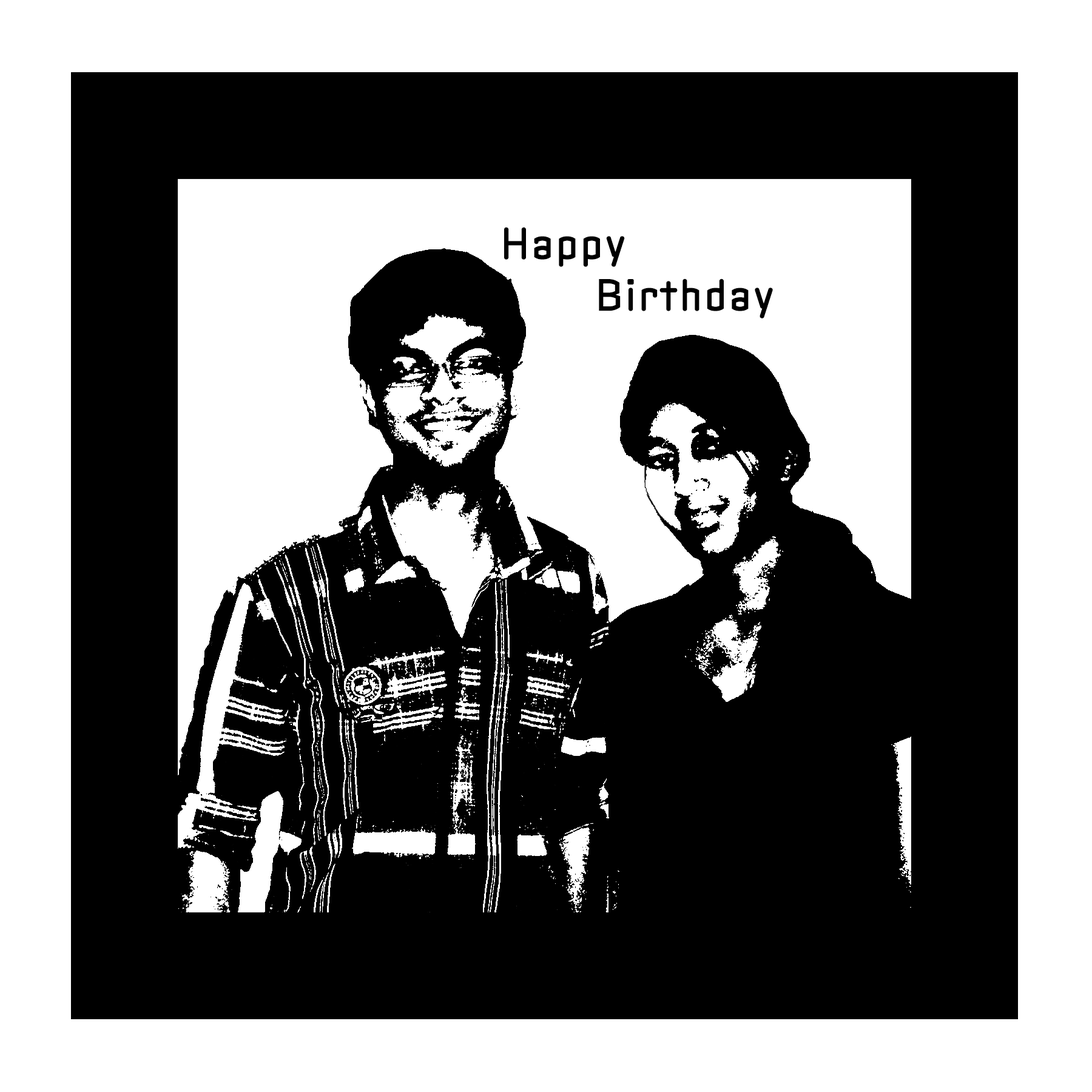
<style>
.page{position:relative;width:1092px;height:1092px;background:#000000}
.page>*{position:absolute;margin:0}
.t1{font:43px "Clicker";color:#000000}
</style>
<div class="page">
<p class="t1" style="left:504px;top:227px;width:269px;height:91px">Happy<br>Birthday</p>
</div>
